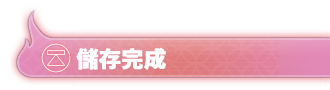
<style>
.page{position:relative;width:330px;height:90px;background:#ffffff}
.page>*{position:absolute;margin:0}
.t1{font:22px "SourceHanSansCN-Heavy";color:#ffffff;font-weight:bold}
</style>
<div class="page">
<p class="t1" style="left:76px;top:47px;width:90px;height:23px">儲存完成</p>
</div>
